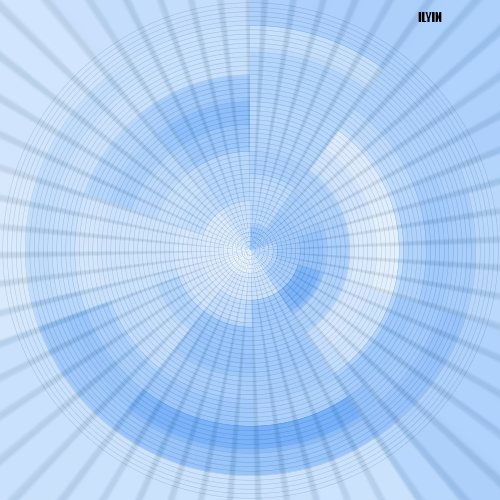
<style>
.page{position:relative;width:500px;height:500px}
.page>*{position:absolute;margin:0}
.t1{font:12.5px "Impact";color:#000000}
</style>
<div class="page">
<p class="t1" style="left:418px;top:12px;width:24px;height:10px">ILYIN</p>
</div>
